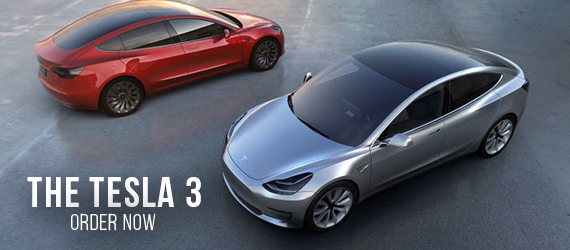
<style>
.page{position:relative;width:570px;height:250px}
.page>*{position:absolute;margin:0}
.t1{font:42.6px "BebasNeueBold";letter-spacing:0.04em;color:#ffffff}
.t2{font:23px "BebasNeueBook";letter-spacing:0.04em;color:#ffffff}
</style>
<div class="page">
<p class="t1" style="left:27px;top:177px;width:174px;height:30px">The TESLA 3</p>
<p class="t2" style="left:71px;top:213px;width:85px;height:18px">Order now</p>
</div>
